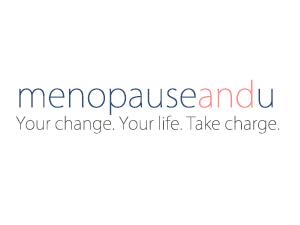
<style>
.page{position:relative;width:300px;height:225px;background:#ffffff}
.page>*{position:absolute;margin:0}
.t1{font:34.4px "KozGoPr6N-ExtraLight";color:#2a5082}
.t2{font:34.4px "KozGoPr6N-ExtraLight";color:#ff8b87}
.t3{font:17.2px "KozGoPr6N-ExtraLight";color:#595959}
</style>
<div class="page">
<p class="t1" style="left:19px;top:79px;width:254px;height:36px">menopause<span class="t2">and</span>u</p>
<p class="t3" style="left:16px;top:115px;width:264px;height:19px">Your change. Your life. Take charge.</p>
</div>
